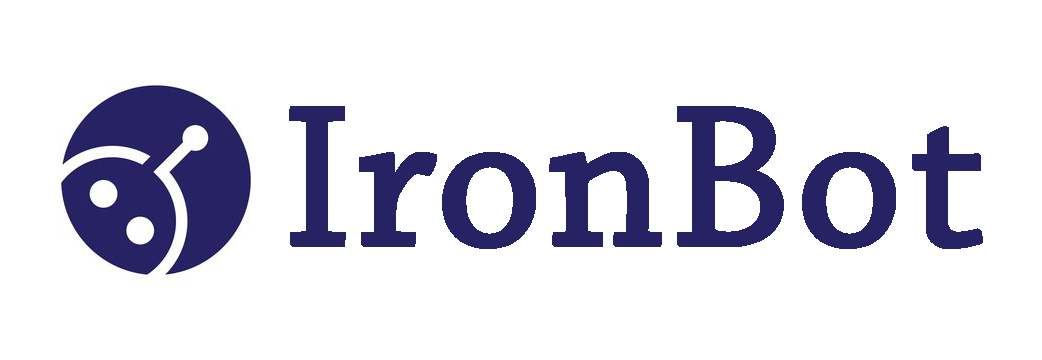
<style>
.page{position:relative;width:1042px;height:360px;background:#ffffff}
.page>*{position:absolute;margin:0}
.t1{font:208.3px "ChaparralPro-Regular";color:#272264;font-weight:bold}
</style>
<div class="page">
<p class="t1" style="left:289px;top:106px;width:694px;height:143px">IronBot</p>
</div>
